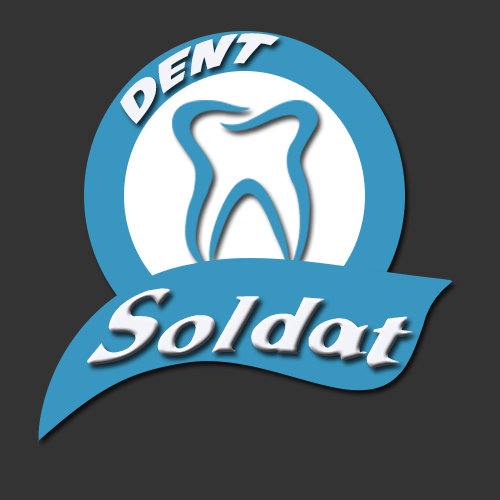
<style>
.page{position:relative;width:500px;height:500px;background:#333333}
.page>*{position:absolute;margin:0}
.t1{font:37.4px "AvengeanceMightiestAvenger";color:#f3f3fa;scale:1.28 1}
.t2{font:107.7px "Dr.Peppers";color:#f3f3fa;scale:1.04 1}
</style>
<div class="page">
<p class="t1" style="left:120px;top:33px;width:160px;height:91px;rotate:-25deg">dent</p>
<p class="t2" style="left:87px;top:288px;width:326px;height:81px">Soldat</p>
</div>
